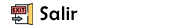
<style>
.page{position:relative;width:170px;height:26px;background:#ffffff}
.page>*{position:absolute;margin:0}
.t1{font:20px "BerlinSansFB-Reg";letter-spacing:0.04em;color:#000000}
</style>
<div class="page">
<p class="t1" style="left:40px;top:6px;width:38px;height:15px">Salir</p>
</div>
